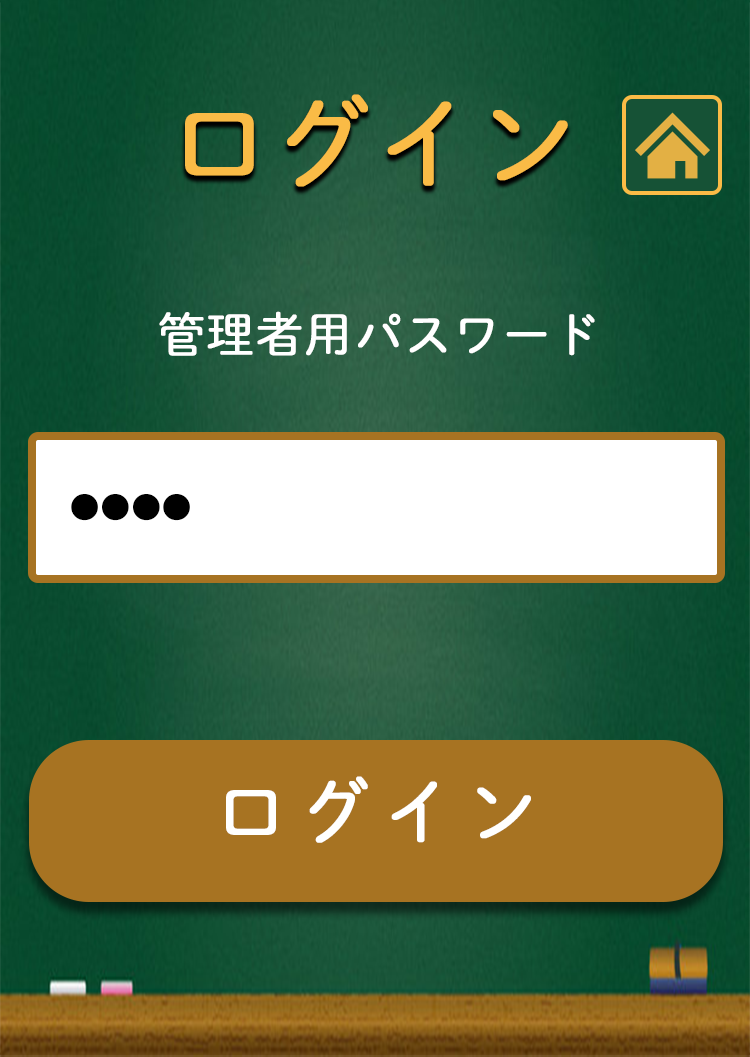
<style>
.page{position:relative;width:750px;height:1057px}
.page>*{position:absolute;margin:0}
.t1{font:100px "DNPShueiMGoStd-L";color:#fabb46;font-weight:bold}
.t2{font:48px "DNPShueiMGoStd-L";color:#ffffff;font-weight:bold}
.t3{font:30px "DNPShueiMGoStd-L";color:#000000;font-weight:bold}
.t4{font:72px "DNPShueiMGoStd-L";color:#fffffe;font-weight:bold}
</style>
<div class="page">
<p class="t1" style="left:185px;top:94px;width:383px;height:93px">ログイン</p>
<p class="t2" style="left:159px;top:311px;width:436px;height:45px">管理者用パスワード</p>
<p class="t3" style="left:71px;top:494px;width:119px;height:27px">●●●●</p>
<p class="t4" style="left:226px;top:776px;width:305px;height:67px">ログイン</p>
</div>
